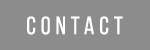
<style>
.page{position:relative;width:150px;height:50px;background:#8c8c8c}
.page>*{position:absolute;margin:0}
.t1{font:25px "BebasNeueRegular";letter-spacing:0.2em;color:#ffffff}
</style>
<div class="page">
<p class="t1" style="left:27px;top:16px;width:96px;height:19px">contact</p>
</div>
